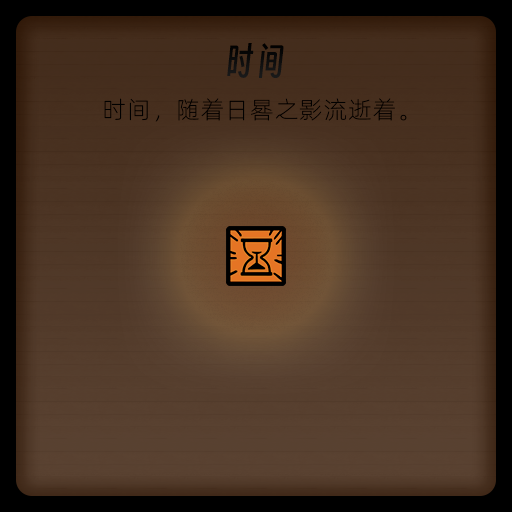
<style>
.page{position:relative;width:512px;height:512px}
.page>*{position:absolute;margin:0}
.t1{font:36px "SmileySans-Oblique";letter-spacing:0.04em;color:#000000}
.t2{font:24px "AlibabaPuHuiTiL";letter-spacing:0.04em;color:#000000}
</style>
<div class="page">
<p class="t1" style="left:227px;top:43px;width:57px;height:35px">时间</p>
<p class="t2" style="left:104px;top:98px;width:303px;height:24px">时间，随着日晷之影流逝着。</p>
</div>
